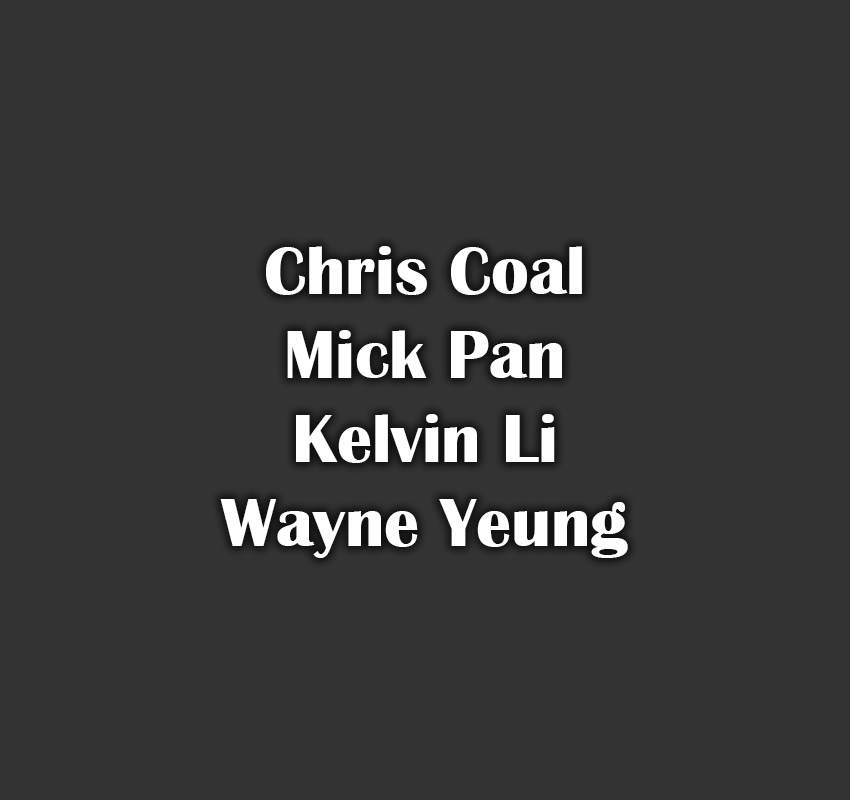
<style>
.page{position:relative;width:850px;height:800px;background:#333333}
.page>*{position:absolute;margin:0}
.t1{font:70px "BritannicBold";color:#fffefe}
</style>
<div class="page">
<p class="t1" style="left:220px;top:246px;width:408px;height:312px;text-align:center">Chris Coal<br>Mick Pan<br>Kelvin Li<br>Wayne Yeung</p>
</div>
